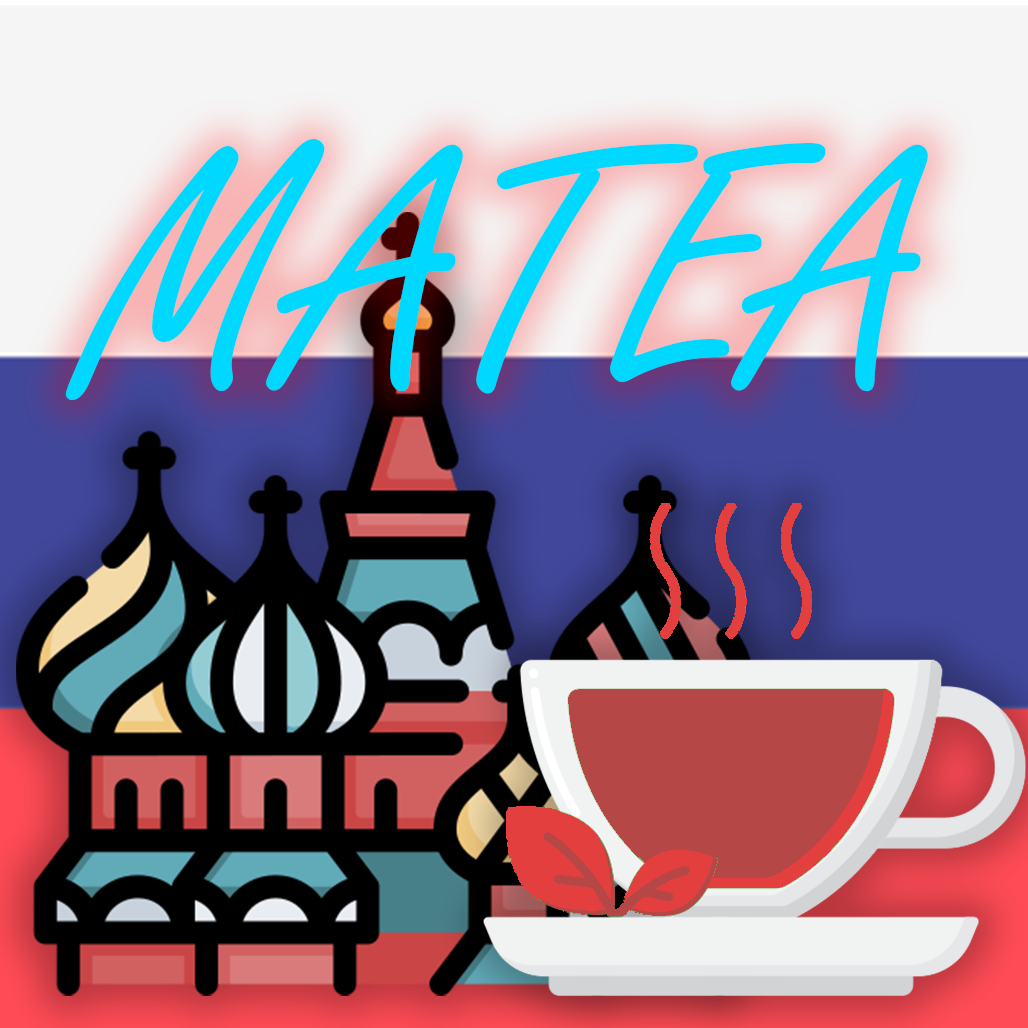
<style>
.page{position:relative;width:1028px;height:1028px}
.page>*{position:absolute;margin:0}
.t1{font:361px "FreestyleScript-Regular";color:#00d8ff}
</style>
<div class="page">
<p class="t1" style="left:65px;top:139px;width:863px;height:262px">MATEA</p>
</div>
